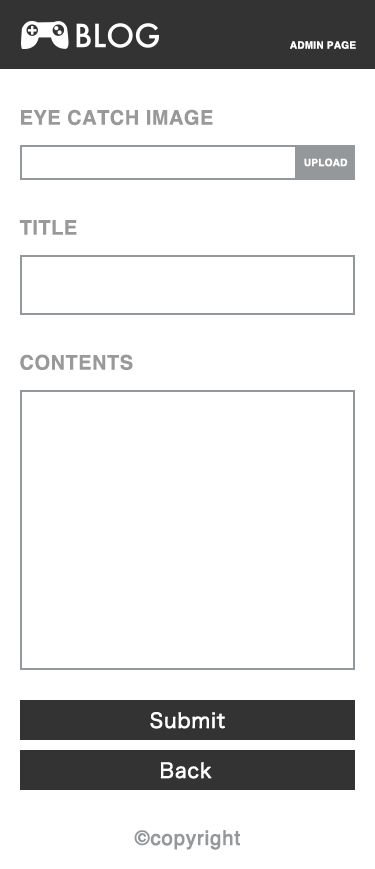
<style>
.page{position:relative;width:375px;height:869px;background:#ffffff}
.page>*{position:absolute;margin:0}
.t1{font:10px "Helvetica-Bold";letter-spacing:0.025em;color:#ffffff;text-transform:uppercase}
.t2{font:20px "Helvetica-Bold";letter-spacing:0.025em;color:#999999;text-transform:uppercase}
.t3{font:20px "HiraKakuProN-W3";letter-spacing:0.025em;color:#ffffff;font-weight:bold}
.t4{font:20px "Helvetica";letter-spacing:0.025em;color:#95989a;font-weight:bold}
</style>
<div class="page">
<p class="t1" style="left:290px;top:41px;width:66px;height:8px">Admin page</p>
<p class="t2" style="left:21px;top:109px;width:192px;height:17px">eye catch image</p>
<p class="t1" style="left:304px;top:158px;width:44px;height:9px">Upload</p>
<p class="t2" style="left:19px;top:220px;width:58px;height:15px">Title</p>
<p class="t2" style="left:20px;top:354px;width:113px;height:16px">Contents</p>
<p class="t3" style="left:150px;top:712px;width:75px;height:17px">Submit</p>
<p class="t3" style="left:160px;top:762px;width:52px;height:17px">Back</p>
<p class="t4" style="left:134px;top:830px;width:106px;height:20px">©copyright</p>
</div>
